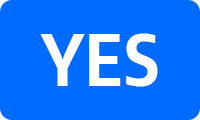
<style>
.page{position:relative;width:200px;height:120px;background:#006cff}
.page>*{position:absolute;margin:0}
.t1{font:70px "EncodeSansCompressed-Bold";letter-spacing:0.015em;color:#ffffff}
</style>
<div class="page">
<p class="t1" style="left:40px;top:33px;width:118px;height:54px">YES</p>
</div>
